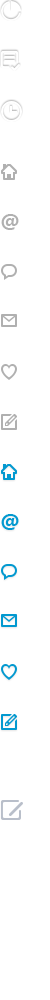
<style>
.page{position:relative;width:50px;height:1000px;background:#ffffff}
.page>*{position:absolute;margin:0}
.t1{font:19px "MicrosoftYaHei-Bold";color:#b0b0b0}
.t2{font:19px "MicrosoftYaHei-Bold";color:#0299d0}
</style>
<div class="page">
<p class="t1" style="left:1px;top:214px;width:18px;height:16px">@</p>
<p class="t2" style="left:1px;top:514px;width:18px;height:16px">@</p>
</div>
